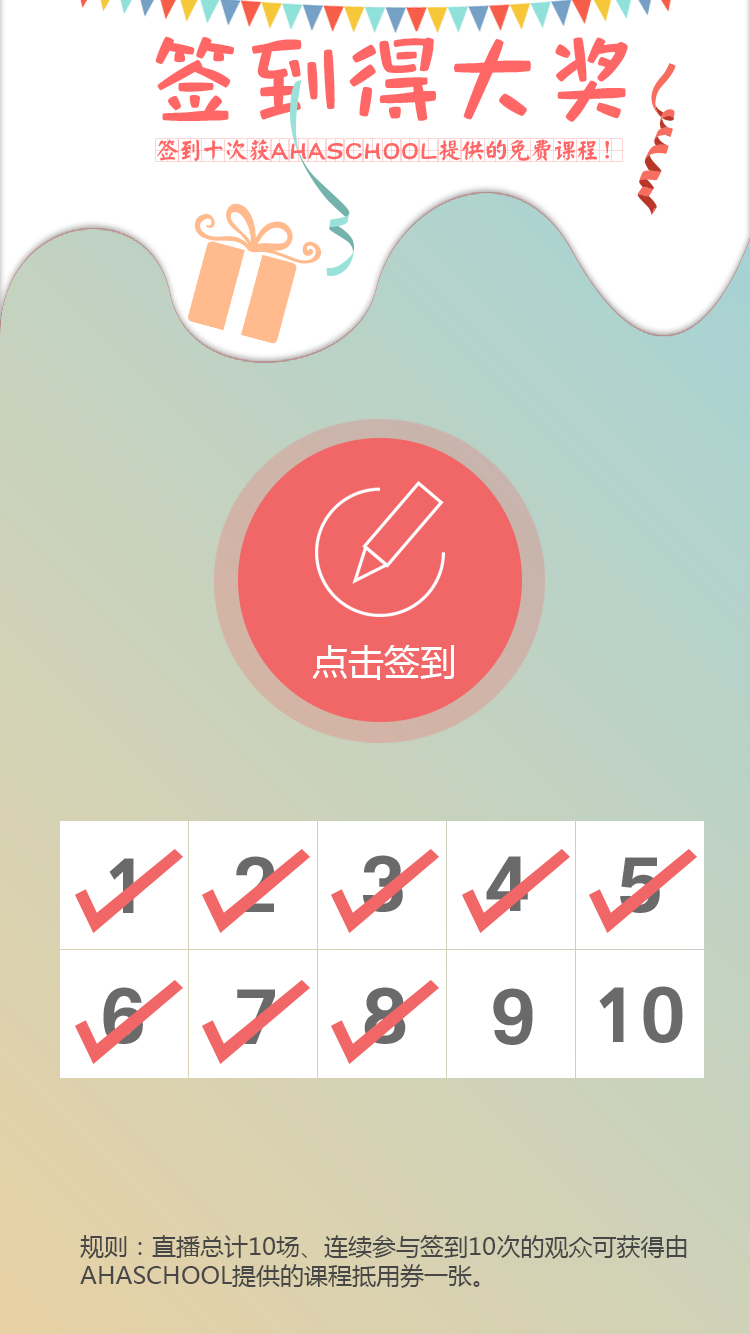
<style>
.page{position:relative;width:750px;height:1334px;background:#ffffff}
.page>*{position:absolute;margin:0}
.t1{font:36px "MicrosoftYaHei";color:#ffffff}
.t2{font:74.5px "ARUDJingXiHeiE1G30-HV"}
.t3{font:74.5px "ARUDJingXiHeiE1G30-HV";color:#6a6a6a}
.t4{font:24px "MicrosoftYaHei";color:#474747}
</style>
<div class="page">
<p class="t1" style="left:312px;top:645px;width:142px;height:35px">点击签到</p>
<p class="t2" style="left:236px;top:856px;width:38px;height:56px">2</p>
<p class="t3" style="left:363px;top:855px;width:40px;height:57px">3</p>
<p class="t3" style="left:486px;top:856px;width:42px;height:55px">4</p>
<p class="t3" style="left:620px;top:857px;width:40px;height:56px">5</p>
<p class="t3" style="left:109px;top:858px;width:25px;height:55px">1</p>
<p class="t3" style="left:103px;top:987px;width:40px;height:57px">6</p>
<p class="t3" style="left:237px;top:989px;width:38px;height:55px">7</p>
<p class="t3" style="left:364px;top:987px;width:42px;height:57px">8</p>
<p class="t3" style="left:493px;top:988px;width:40px;height:57px">9</p>
<p class="t3" style="left:599px;top:986px;width:84px;height:57px">10</p>
<p class="t4" style="left:80px;top:1235px;width:607px;height:53px">规则：直播总计10场、连续参与签到10次的观众可获得由AHASCHOOL提供的课程抵用券一张。</p>
</div>
